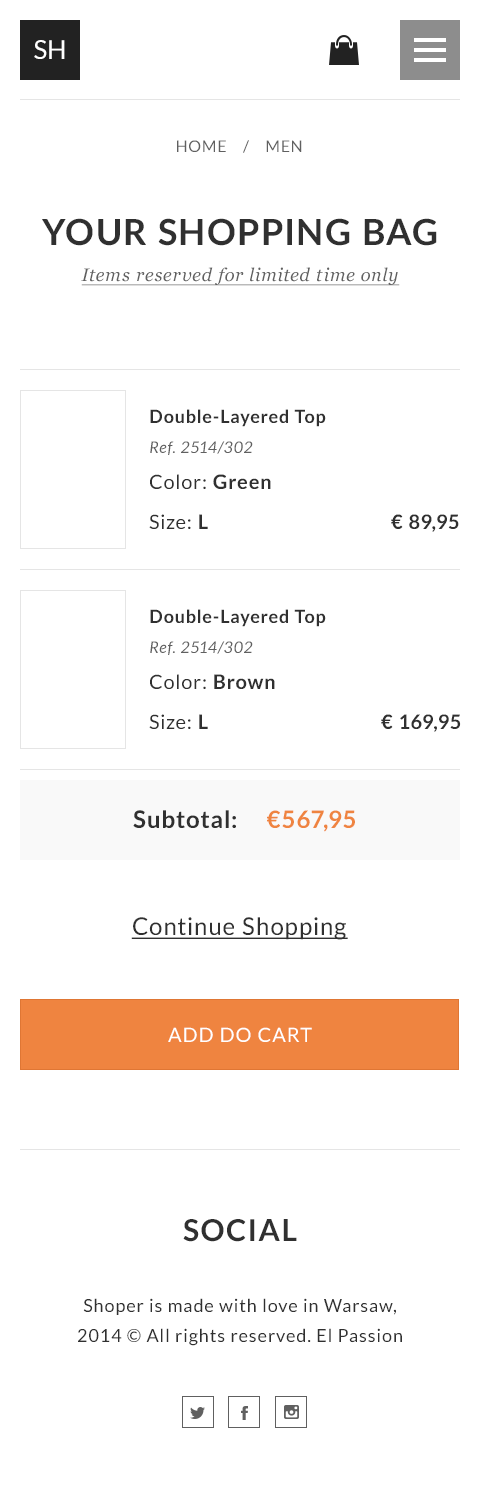
<style>
.page{position:relative;width:480px;height:1500px;background:#ffffff}
.page>*{position:absolute;margin:0}
.t1{font:25.9px "Lato-Regular";color:#ffffff;text-transform:uppercase}
.t2{font:16px "Lato-Regular";letter-spacing:0.05em;color:#606060;text-transform:uppercase}
.t3{font:18px/36px "Georgia-Italic";letter-spacing:0.05em;color:#606060;text-decoration:underline}
.t4{font:36px/36px "Lato-Bold";letter-spacing:0.05em;color:#303030;text-transform:uppercase}
.t5{font:18px/30px "Lato-Bold";letter-spacing:0.05em;color:#303030}
.t6{font:16px/30px "Lato-Italic";letter-spacing:0.05em;color:#606060}
.t7{font:20px "Lato-Regular";letter-spacing:0.05em;color:#303030}
.t8{font:20px "Lato-Bold";letter-spacing:0.05em;color:#303030}
.t9{font:24px "Lato-Bold";letter-spacing:0.05em;color:#303030}
.t10{font:24px "Lato-Bold";letter-spacing:0.05em;color:#ef8440}
.t11{font:24px "Lato-Regular";letter-spacing:0.05em;color:#303030;text-decoration:underline}
.t12{font:20px "Lato-Regular";letter-spacing:0.05em;color:#ffffff;text-transform:uppercase}
.t13{font:30px "Lato-Bold";letter-spacing:0.05em;color:#303030;text-transform:uppercase}
.t14{font:18px/30px "Lato-Regular";letter-spacing:0.05em;color:#303030}
</style>
<div class="page">
<p class="t1" style="left:34px;top:40px;width:31px;height:19px">SH</p>
<p class="t2" style="left:177px;top:140px;width:125px;height:13px">HOME    /    Men</p>
<p class="t3" style="left:42px;top:218px;width:395px;height:68px;text-align:center"><span class="t4">Your Shopping Bag<br></span>Items reserved for limited time only</p>
<p class="t5" style="left:150px;top:409px;width:176px;height:46px">Double-Layered Top<br><span class="t6">Ref. 2514/302</span></p>
<p class="t7" style="left:150px;top:474px;width:121px;height:15px">Color: <span class="t8">Green</span></p>
<p class="t7" style="left:149px;top:514px;width:59px;height:15px">Size: <span class="t8">L</span></p>
<p class="t8" style="left:391px;top:514px;width:68px;height:18px">€ 89,95</p>
<p class="t5" style="left:150px;top:609px;width:176px;height:46px">Double-Layered Top<br><span class="t6">Ref. 2514/302</span></p>
<p class="t7" style="left:150px;top:674px;width:125px;height:15px">Color: <span class="t8">Brown</span></p>
<p class="t7" style="left:149px;top:714px;width:59px;height:15px">Size: <span class="t8">L</span></p>
<p class="t8" style="left:381px;top:714px;width:80px;height:18px">€ 169,95</p>
<p class="t9" style="left:133px;top:810px;width:103px;height:18px">Subtotal:</p>
<p class="t10" style="left:267px;top:810px;width:88px;height:22px">€567,95</p>
<p class="t11" style="left:131px;top:917px;width:217px;height:23px">Continue Shopping</p>
<p class="t12" style="left:168px;top:1027px;width:144px;height:15px">Add do cart</p>
<p class="t13" style="left:183px;top:1219px;width:114px;height:23px">social</p>
<p class="t14" style="left:78px;top:1298px;width:324px;height:48px;text-align:center">Shoper is made with love in Warsaw,<br>2014 © All rights reserved. El Passion</p>
</div>
